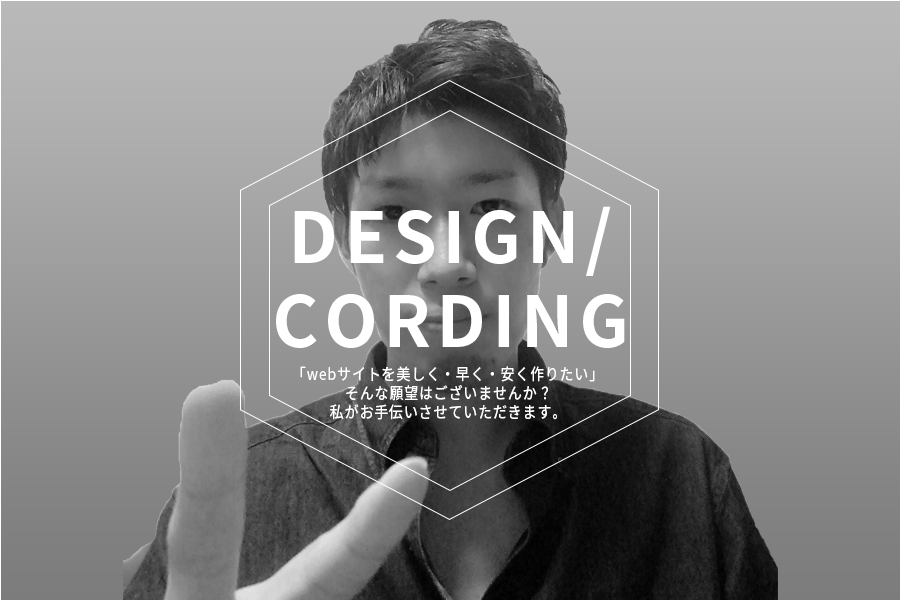
<style>
.page{position:relative;width:900px;height:600px}
.page>*{position:absolute;margin:0}
.t1{font:70px "SourceHanSansJP-Bold";letter-spacing:0.08em;color:#ffffff}
.t2{font:16px "SourceHanSansJP-Regular";letter-spacing:0.08em;color:#ffffff;scale:0.87 1}
</style>
<div class="page">
<p class="t1" style="left:276px;top:206px;width:349px;height:142px;text-align:center">DESIGN/<br>CORDING</p>
<p class="t2" style="left:300px;top:366px;width:295px;height:54px;text-align:center">「webサイトを美しく・早く・安く作りたい」<br>そんな願望はございませんか？<br>私がお手伝いさせていただきます。</p>
</div>
